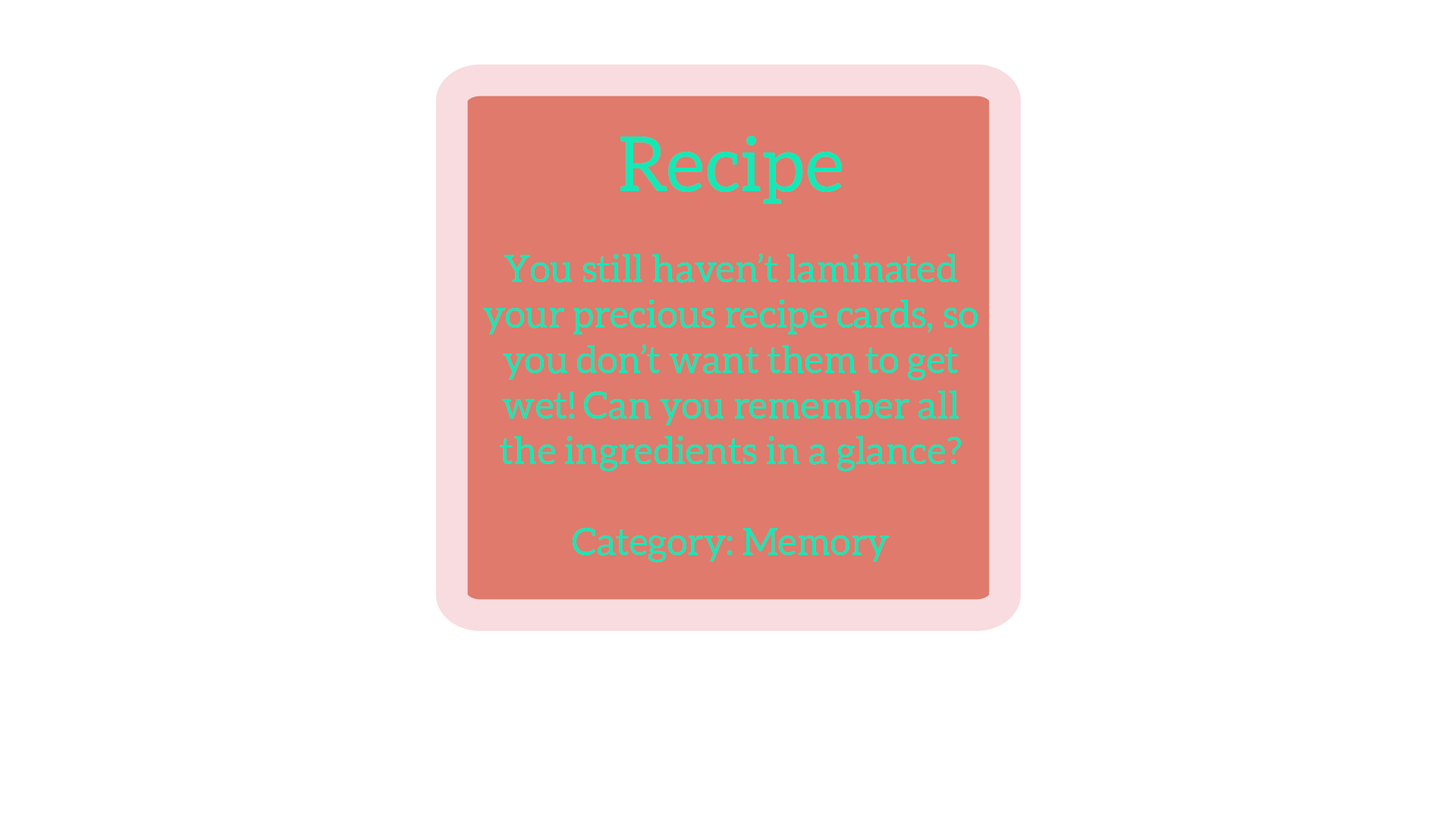
<style>
.page{position:relative;width:1456px;height:819px;background:#ffffff}
.page>*{position:absolute;margin:0}
.t1{font:37.9px "Aleo-Regular";color:#14e8b6}
.t2{font:75.8px "Aleo-Regular";color:#14e8b6}
</style>
<div class="page">
<p class="t1" style="left:483px;top:136px;width:494px;height:427px;text-align:center"><span class="t2">Recipe<br></span><br>You still haven’t laminated your precious recipe cards, so you don’t want them to get wet! Can you remember all the ingredients in a glance?<br><br>Category: Memory</p>
</div>
